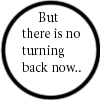
<style>
.page{position:relative;width:100px;height:100px;background:#ffffff}
.page>*{position:absolute;margin:0}
.t1{font:14px "Minion-Regular";color:#000000}
</style>
<div class="page">
<p class="t1" style="left:22px;top:12px;width:59px;height:60px">But <br>there is no<br>turning<br>back now..</p>
</div>
